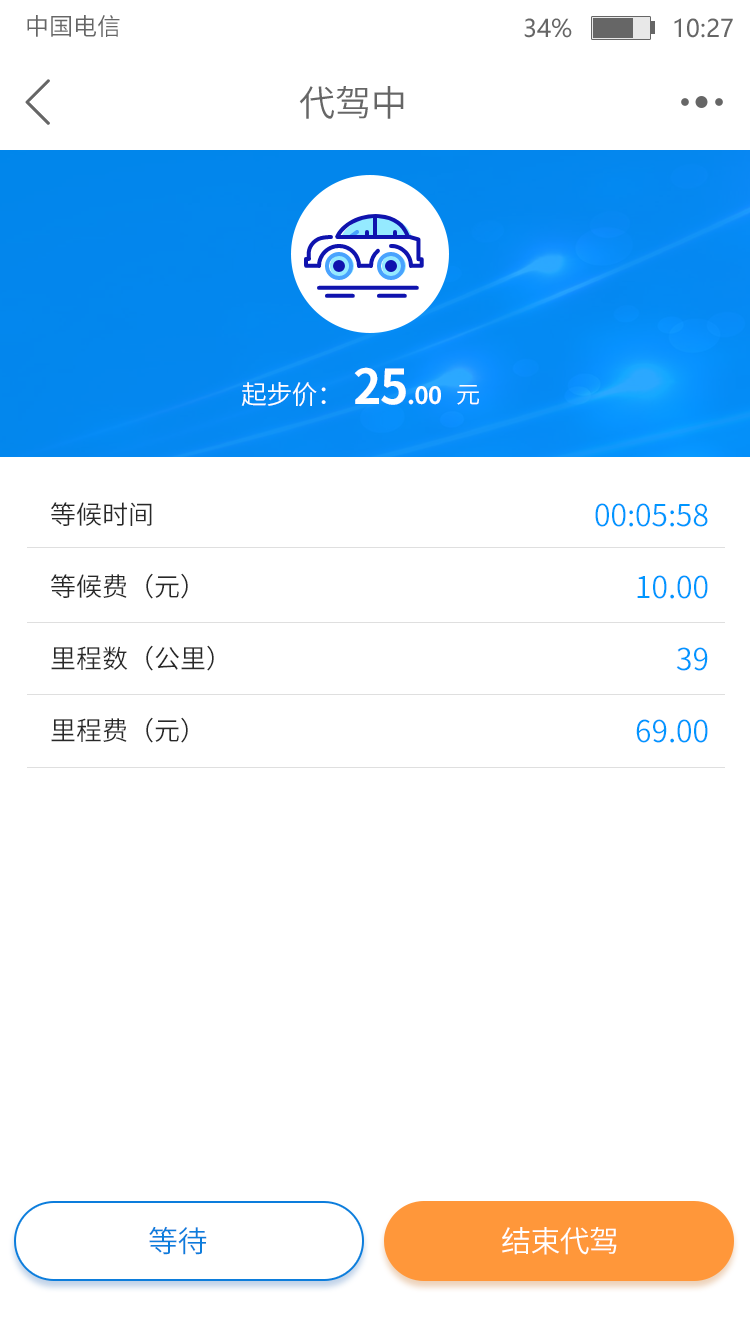
<style>
.page{position:relative;width:750px;height:1336px;background:#ffffff}
.page>*{position:absolute;margin:0}
.t1{font:24px "SourceHanSansCN-Normal";color:#666666}
.t2{font:24px "MicrosoftYaHei";color:#666666}
.t3{font:36px "SourceHanSansCN-Normal";color:#666666}
.t4{font:24px "SourceHanSansCN-Bold";letter-spacing:-0.025em;color:#ffffff}
.t5{font:48px "SourceHanSansCN-Bold";letter-spacing:-0.025em;color:#ffffff}
.t6{font:26px "SourceHanSansCN-Normal";letter-spacing:-0.025em;color:#ffffff}
.t7{font:24px "SourceHanSansCN-Normal";letter-spacing:-0.025em;color:#ffffff}
.t8{font:26px/72px "SourceHanSansCN-Normal";color:#282828}
.t9{font:30px/72px "SourceHanSansCN-Normal";color:#0096ff}
.t10{font:30px "SourceHanSansCN-Normal";letter-spacing:-0.025em;color:#0c7ddc}
.t11{font:30px "SourceHanSansCN-Normal";letter-spacing:-0.025em;color:#ffffff}
</style>
<div class="page">
<p class="t1" style="left:27px;top:15px;width:93px;height:22px">中国电信</p>
<p class="t2" style="left:524px;top:18px;width:209px;height:20px">34%              10:27</p>
<p class="t3" style="left:299px;top:86px;width:105px;height:33px">代驾中</p>
<p class="t4" style="left:354px;top:367px;width:87px;height:38px"><span class="t5">25</span>.00</p>
<p class="t6" style="left:241px;top:382px;width:85px;height:25px">起步价：</p>
<p class="t7" style="left:457px;top:385px;width:22px;height:20px">元</p>
<p class="t8" style="left:51px;top:502px;width:163px;height:241px">等候时间<br>等候费（元）<br>里程数（公里）<br>里程费（元）</p>
<p class="t9" style="left:595px;top:503px;width:113px;height:240px;text-align:right">00:05:58<br>10.00<br>39<br>69.00</p>
<p class="t10" style="left:149px;top:1226px;width:58px;height:29px">等待</p>
<p class="t11" style="left:502px;top:1227px;width:115px;height:28px">结束代驾</p>
</div>
